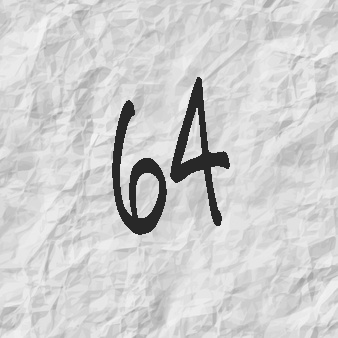
<style>
.page{position:relative;width:338px;height:338px}
.page>*{position:absolute;margin:0}
.t1{font:206.4px "SegoeScript";color:#282828;scale:0.43 1}
</style>
<div class="page">
<p class="t1" style="left:112px;top:77px;width:118px;height:158px;rotate:-11deg">64</p>
</div>
